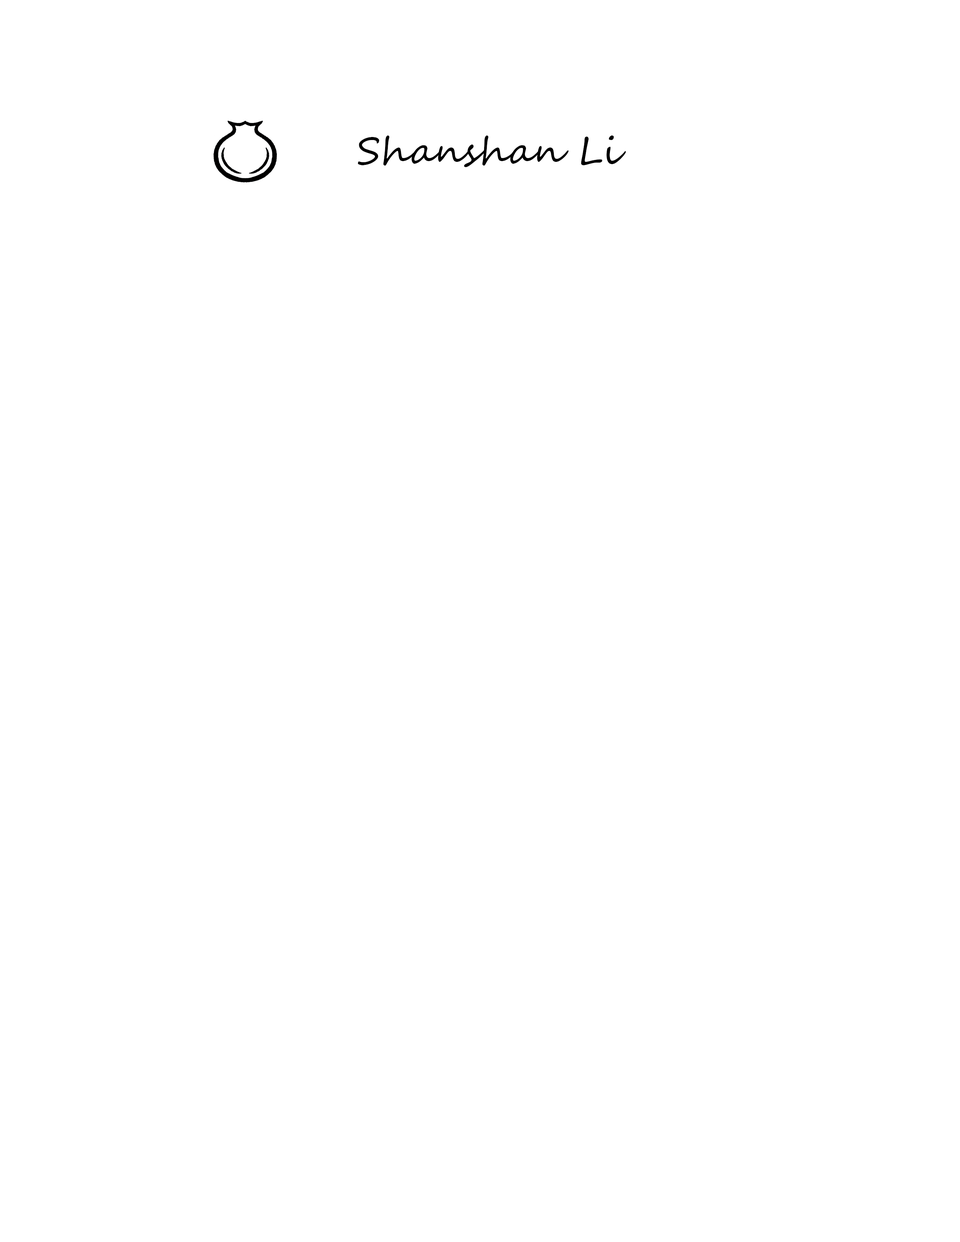
<style>
.page{position:relative;width:960px;height:1242px;background:#ffffff}
.page>*{position:absolute;margin:0}
.t1{font:37.6px "SegoeScript";color:#000000}
</style>
<div class="page">
<p class="t1" style="left:358px;top:136px;width:268px;height:31px">Shanshan Li</p>
</div>
